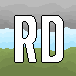
<style>
.page{position:relative;width:76px;height:76px;background:#ffffff}
.page>*{position:absolute;margin:0}
.t1{font:62.5px "BigNoodleTitling";letter-spacing:0.03em;color:#ffffff;font-weight:bold}
</style>
<div class="page">
<p class="t1" style="left:15px;top:16px;width:48px;height:46px">RD</p>
</div>
